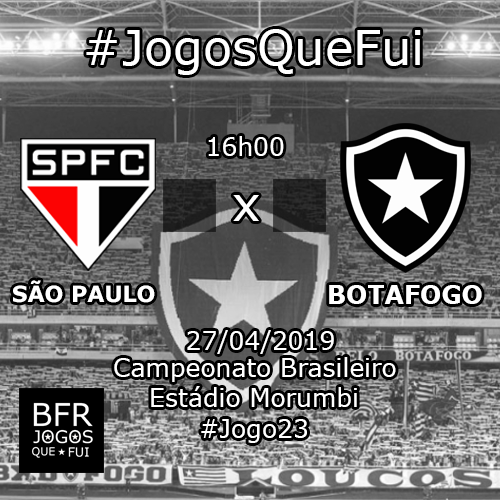
<style>
.page{position:relative;width:500px;height:500px}
.page>*{position:absolute;margin:0}
.t1{font:48px "Verdana";color:#ffffff}
.t2{font:25px "Verdana";color:#ffffff}
.t3{font:22.1px "Verdana-Bold";color:#ffffff}
.t4{font:25px "Verdana-Bold";color:#ffffff}
</style>
<div class="page">
<p class="t1" style="left:86px;top:29px;width:335px;height:46px">#JogosQueFui</p>
<p class="t2" style="left:208px;top:136px;width:76px;height:20px">16h00</p>
<p class="t1" style="left:233px;top:195px;width:26px;height:26px">x</p>
<p class="t3" style="left:13px;top:280px;width:142px;height:23px">SÃO PAULO</p>
<p class="t4" style="left:329px;top:285px;width:153px;height:19px">BOTAFOGO</p>
<p class="t2" style="left:187px;top:330px;width:147px;height:24px">27/04/2019</p>
<p class="t2" style="left:114px;top:357px;width:282px;height:25px">Campeonato Brasileiro</p>
<p class="t2" style="left:151px;top:386px;width:206px;height:21px">Estádio Morumbi</p>
<p class="t2" style="left:201px;top:419px;width:106px;height:24px">#Jogo23</p>
</div>
